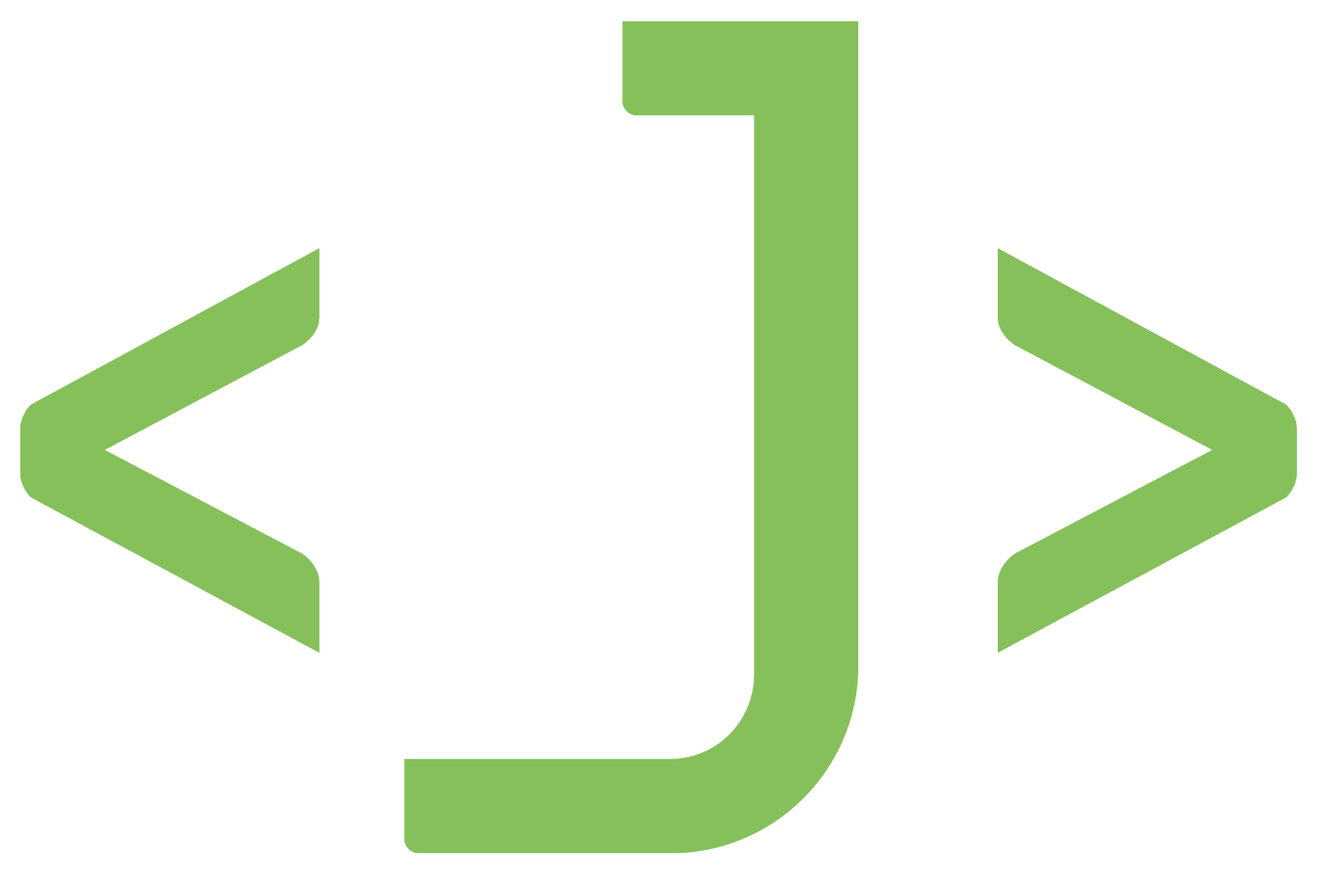
<style>
.page{position:relative;width:1343px;height:888px;background:#ffffff}
.page>*{position:absolute;margin:0}
.t1{font:1107.2px "Prime-Regular";letter-spacing:0.01em;color:#85c05b;text-transform:uppercase}
</style>
<div class="page">
<p class="t1" style="left:20px;top:20px;width:1277px;height:834px">&lt;j&gt;</p>
</div>
